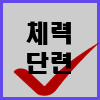
<style>
.page{position:relative;width:100px;height:100px;background:#cccccc}
.page>*{position:absolute;margin:0}
.t1{font:24px/30px "HeadlineR-HM";color:#000000}
</style>
<div class="page">
<p class="t1" style="left:26px;top:21px;width:45px;height:53px;text-align:center">체력<br>단련</p>
</div>
